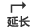
<style>
.page{position:relative;width:37px;height:28px;background:#ffffff}
.page>*{position:absolute;margin:0}
.t1{font:11px "MicrosoftYaHei";letter-spacing:0.01em;color:#333333;font-weight:bold}
</style>
<div class="page">
<p class="t1" style="left:7px;top:16px;width:23px;height:11px">延长</p>
</div>
